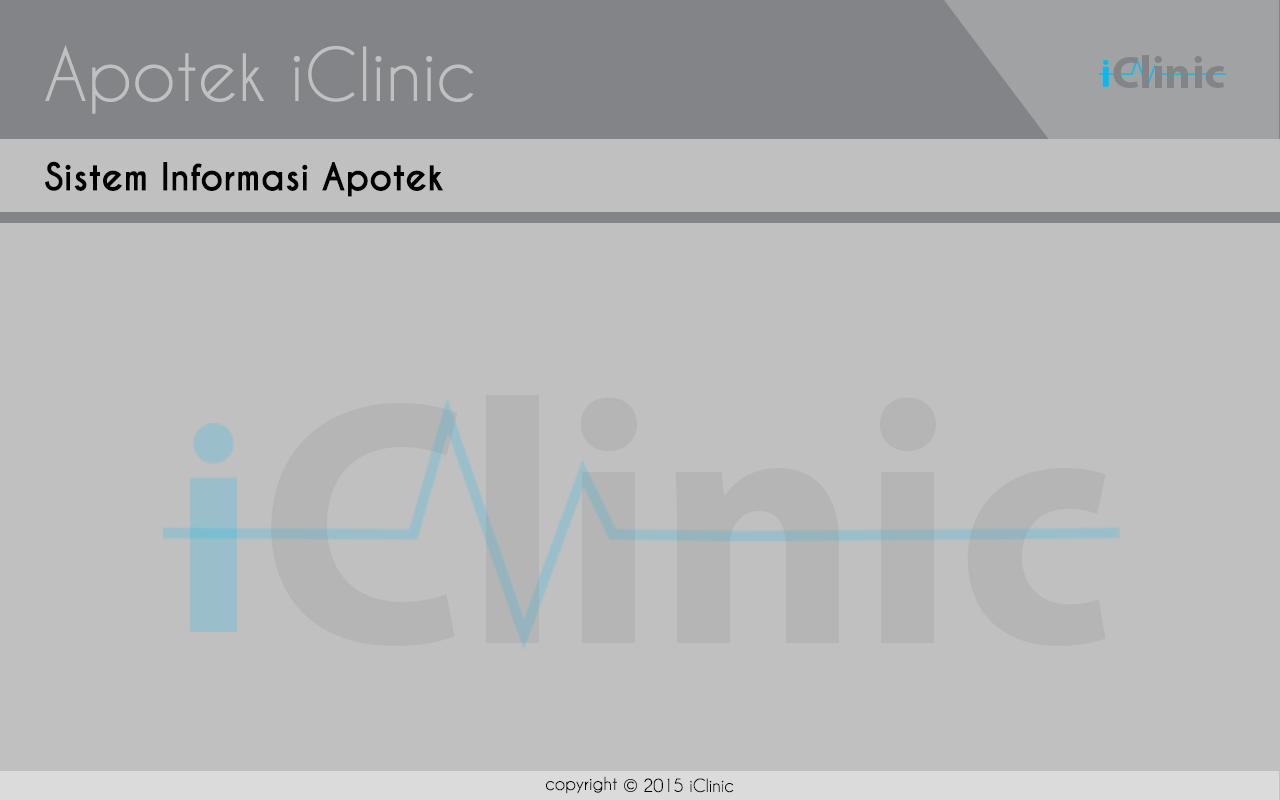
<style>
.page{position:relative;width:1280px;height:800px;background:#c0c0c0}
.page>*{position:absolute;margin:0}
.t1{font:69.4px "CaviarDreams";color:#c0c0c0}
.t2{font:45.1px "MyriadPro-Bold";color:#828487}
.t3{font:36.1px "CaviarDreams-Bold";color:#000000}
.t4{font:350px "MyriadPro-Bold";color:#b5b5b5}
.t5{font:16.8px "CaviarDreams";color:#000000}
.t6{font:14.3px "CaviarDreams";color:#000000}
.t7{font:16.9px "CaviarDreams";color:#000000}
</style>
<div class="page">
<p class="t1" style="left:45px;top:45px;width:429px;height:69px">Apotek iClinic</p>
<p class="t2" style="left:1113px;top:55px;width:111px;height:33px">Clinic</p>
<p class="t3" style="left:45px;top:161px;width:398px;height:36px">Sistem Informasi Apotek</p>
<p class="t4" style="left:271px;top:395px;width:835px;height:252px">Clinic</p>
<p class="t5" style="left:546px;top:776px;width:71px;height:18px">copyright</p>
<p class="t6" style="left:627px;top:781px;width:7px;height:9px">c</p>
<p class="t7" style="left:644px;top:778px;width:90px;height:15px">2015 iClinic</p>
</div>
